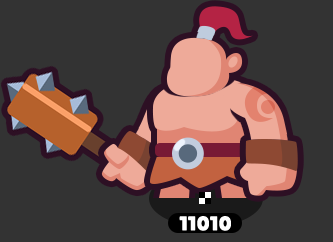
<style>
.page{position:relative;width:333px;height:242px;background:#333333}
.page>*{position:absolute;margin:0}
.t1{font:20px "LilitaOne";color:#ffffff;font-weight:bold}
</style>
<div class="page">
<p class="t1" style="left:179px;top:216px;width:52px;height:15px">11010</p>
</div>
